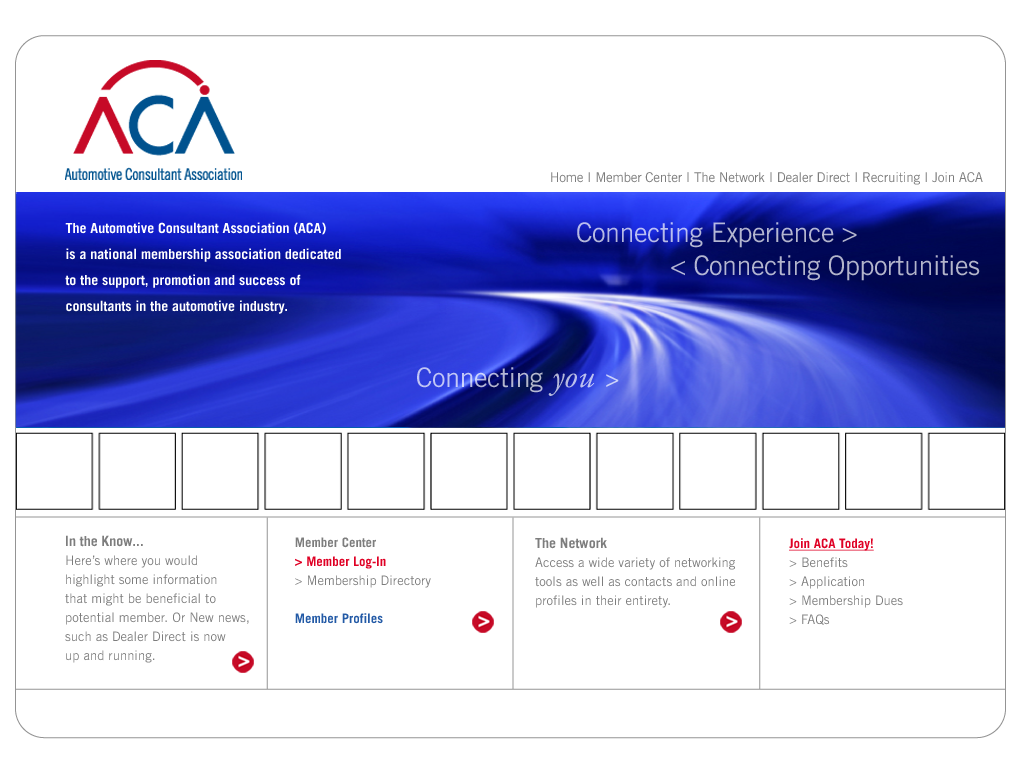
<style>
.page{position:relative;width:1022px;height:768px;background:#ffffff}
.page>*{position:absolute;margin:0}
.t1{font:13.5px "TradeGothic";letter-spacing:-0.02em;color:#7d7d7d}
.t2{font:14px/26px "TradeGothic-Bold";color:#ffffff}
.t3{font:27px "TradeGothic";letter-spacing:-0.02em;color:#b4b7d7}
.t4{font:27px "TradeGothic";letter-spacing:-0.02em;color:#b3b5cb}
.t5{font:27px "TradeGothic";letter-spacing:-0.02em}
.t6{font:33px "AGaramond-Italic";letter-spacing:0.02em}
.t7{font:31px "AGaramond-Italic";letter-spacing:-0.02em}
.t8{font:13px/19px "TradeGothic";color:#7d7d7d}
.t9{font:14px/24px "TradeGothic-Bold";color:#7d7d7d}
.t10{font:13px/19px "TradeGothic-Bold";color:#7d7d7d}
.t11{font:13px/19px "TradeGothic-Bold";color:#df0024}
.t12{font:13px/19px "TradeGothic-Bold";color:#235aa6}
.t13{font:14px/26px "TradeGothic-Bold";color:#7d7d7d}
.t14{font:13px/19px "TradeGothic-Bold";color:#df0024;text-decoration:underline}
</style>
<div class="page">
<p class="t1" style="left:551px;top:172px;width:432px;height:13px">Home I Member Center I The Network I Dealer Direct I Recruiting I Join ACA</p>
<p class="t2" style="left:65px;top:222px;width:276px;height:92px">The Automotive Consultant Association (ACA) <br>is a national membership association dedicated <br>to the support, promotion and success of <br>consultants in the automotive industry.</p>
<p class="t3" style="left:577px;top:222px;width:280px;height:26px">Connecting Experience &gt;</p>
<p class="t4" style="left:671px;top:255px;width:309px;height:26px">&lt; Connecting Opportunities</p>
<p class="t5" style="left:417px;top:367px;width:202px;height:29px">Connecting <span class="t6">you</span><span class="t7"> &gt;</span></p>
<p class="t8" style="left:65px;top:535px;width:184px;height:128px"><span class="t9">In the Know...<br></span>Here’s where you would <br>highlight some information <br>that might be beneficial to <br>potential member. Or New news, <br>such as Dealer Direct is now <br>up and running.</p>
<p class="t8" style="left:295px;top:537px;width:136px;height:87px"><span class="t10">Member Center<br></span><span class="t11">&gt; Member Log-In<br></span>&gt; Membership Directory<br><br><span class="t12">Member Profiles</span></p>
<p class="t8" style="left:535px;top:537px;width:201px;height:71px"><span class="t13">The Network<br></span>Access a wide variety of networking <br>tools as well as contacts and online <br>profiles in their entirety.</p>
<p class="t8" style="left:789px;top:538px;width:114px;height:87px"><span class="t14">Join ACA Today!<br></span>&gt; Benefits<br>&gt; Application<br>&gt; Membership Dues<br>&gt; FAQs</p>
</div>
